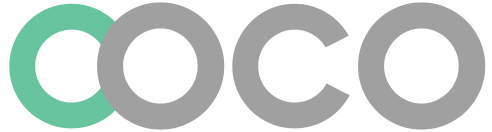
<style>
.page{position:relative;width:492px;height:132px;background:#ffffff}
.page>*{position:absolute;margin:0}
.t1{font:172px "COUTURE-Bold";color:#a0a0a0}
.t2{font:172px "COUTURE-Bold";letter-spacing:-0.22em;color:#68c39f}
</style>
<div class="page">
<p class="t1" style="left:9px;top:2px;width:477px;height:128px"><span class="t2">C</span>OCO</p>
</div>
